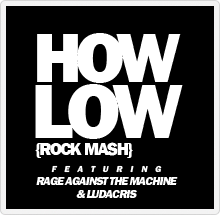
<style>
.page{position:relative;width:220px;height:215px;background:#000000}
.page>*{position:absolute;margin:0}
.t1{font:72px/52px "FranklinGothic-Heavy";letter-spacing:-0.08em;color:#ffffff;text-transform:uppercase}
.t2{font:79px/56px "FranklinGothic-Heavy";letter-spacing:-0.08em;color:#ffffff;text-transform:uppercase}
.t3{font:18px "FranklinGothic-Heavy";letter-spacing:-0.08em;color:#ffffff;text-transform:uppercase}
.t4{font:12px/13px "FranklinGothic-Heavy";letter-spacing:-0.08em;color:#ffffff;text-transform:uppercase;font-style:italic}
.t5{font:9px/13px "FranklinGothic-Heavy";letter-spacing:0.86em;color:#ffffff;text-transform:uppercase;font-style:italic}
</style>
<div class="page">
<p class="t1" style="left:35px;top:33px;width:148px;height:106px;text-align:center">hOW<br><span class="t2">low</span></p>
<p class="t3" style="left:35px;top:142px;width:98px;height:16px">{ROCK MASH}</p>
<p class="t4" style="left:36px;top:165px;width:142px;height:33px;text-align:center"><span class="t5">FeatURING<br></span>Rage Against The Machine &amp; Ludacris</p>
</div>
